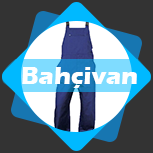
<style>
.page{position:relative;width:153px;height:153px;background:#333333}
.page>*{position:absolute;margin:0}
.t1{font:25px "ErasITC-Bold";color:#ffffff}
</style>
<div class="page">
<p class="t1" style="left:22px;top:67px;width:115px;height:21px">Bahçivan</p>
</div>
